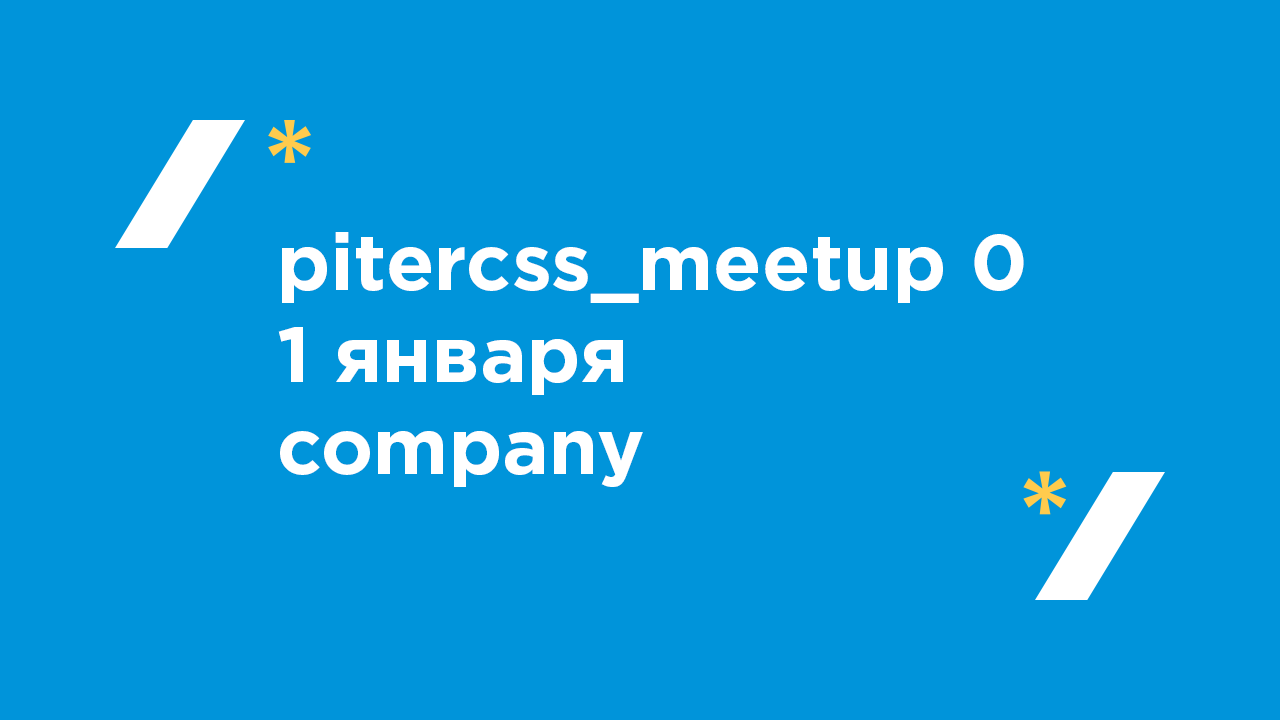
<style>
.page{position:relative;width:1280px;height:720px;background:#0094da}
.page>*{position:absolute;margin:0}
.t1{font:79.1px/92.1px "GothamPro-Bold";color:#ffffff}
</style>
<div class="page">
<p class="t1" style="left:278px;top:232px;width:746px;height:255px">pitercss_meetup 0<br>1 января<br>company</p>
</div>
